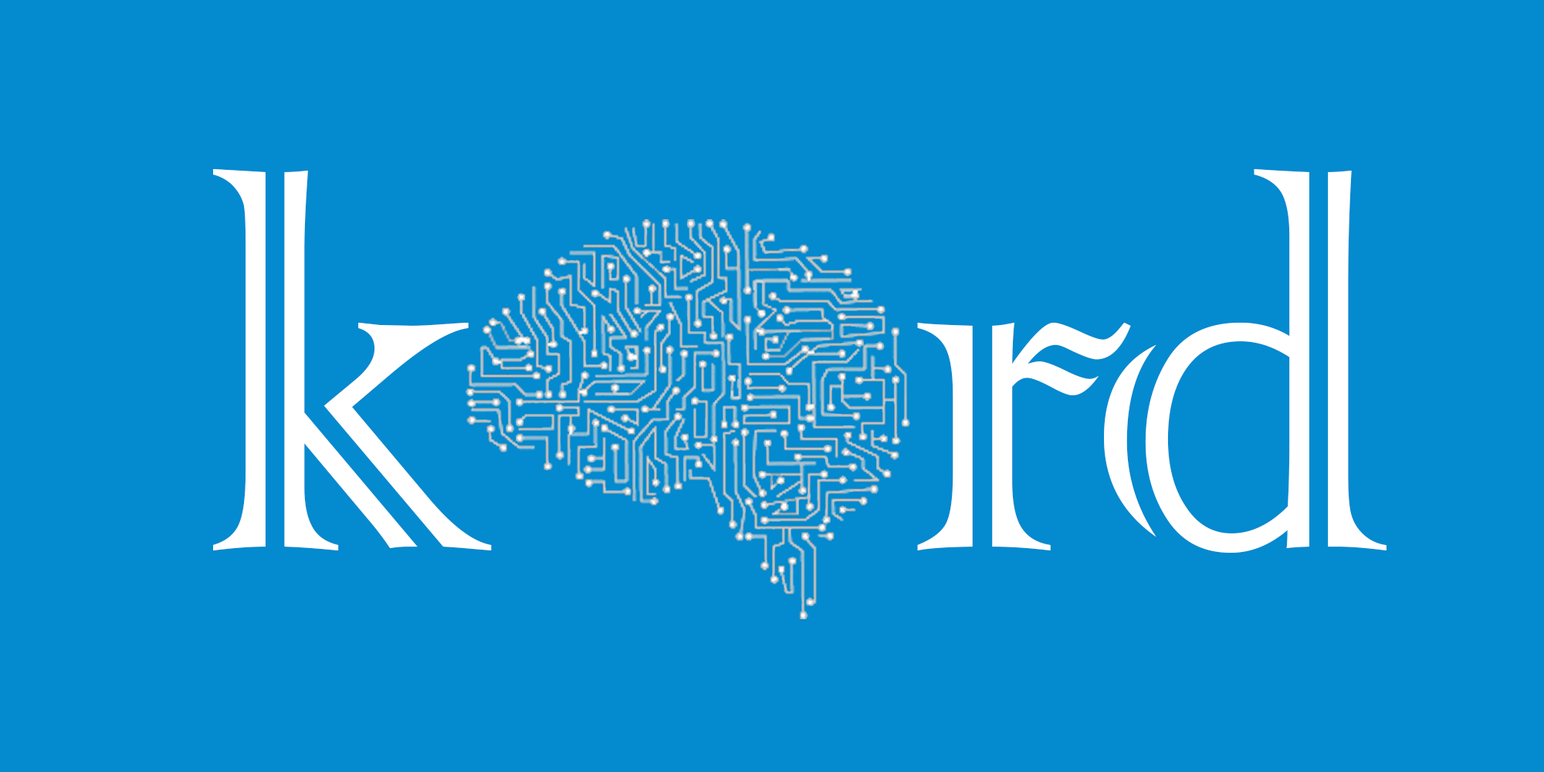
<style>
.page{position:relative;width:1544px;height:772px;background:#038acf}
.page>*{position:absolute;margin:0}
.t1{font:634.1px "ColonnaMT";letter-spacing:-0.05em;color:#ffffff;scale:0.89 1}
</style>
<div class="page">
<p class="t1" style="left:213px;top:169px;width:1174px;height:384px">k    rd</p>
</div>
